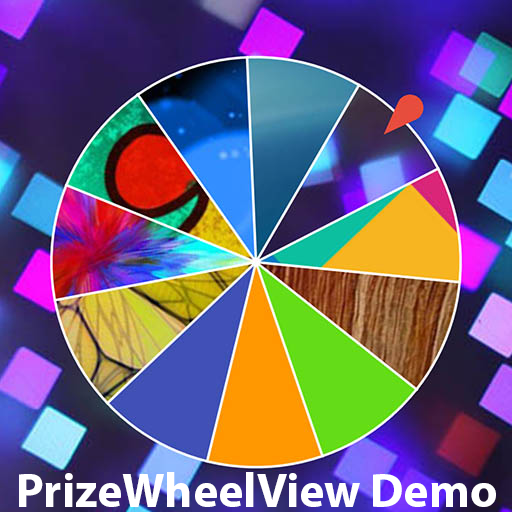
<style>
.page{position:relative;width:512px;height:512px}
.page>*{position:absolute;margin:0}
.t1{font:48px "MyriadPro-Bold";color:#ffffff}
</style>
<div class="page">
<p class="t1" style="left:19px;top:472px;width:477px;height:35px">PrizeWheelView Demo</p>
</div>
